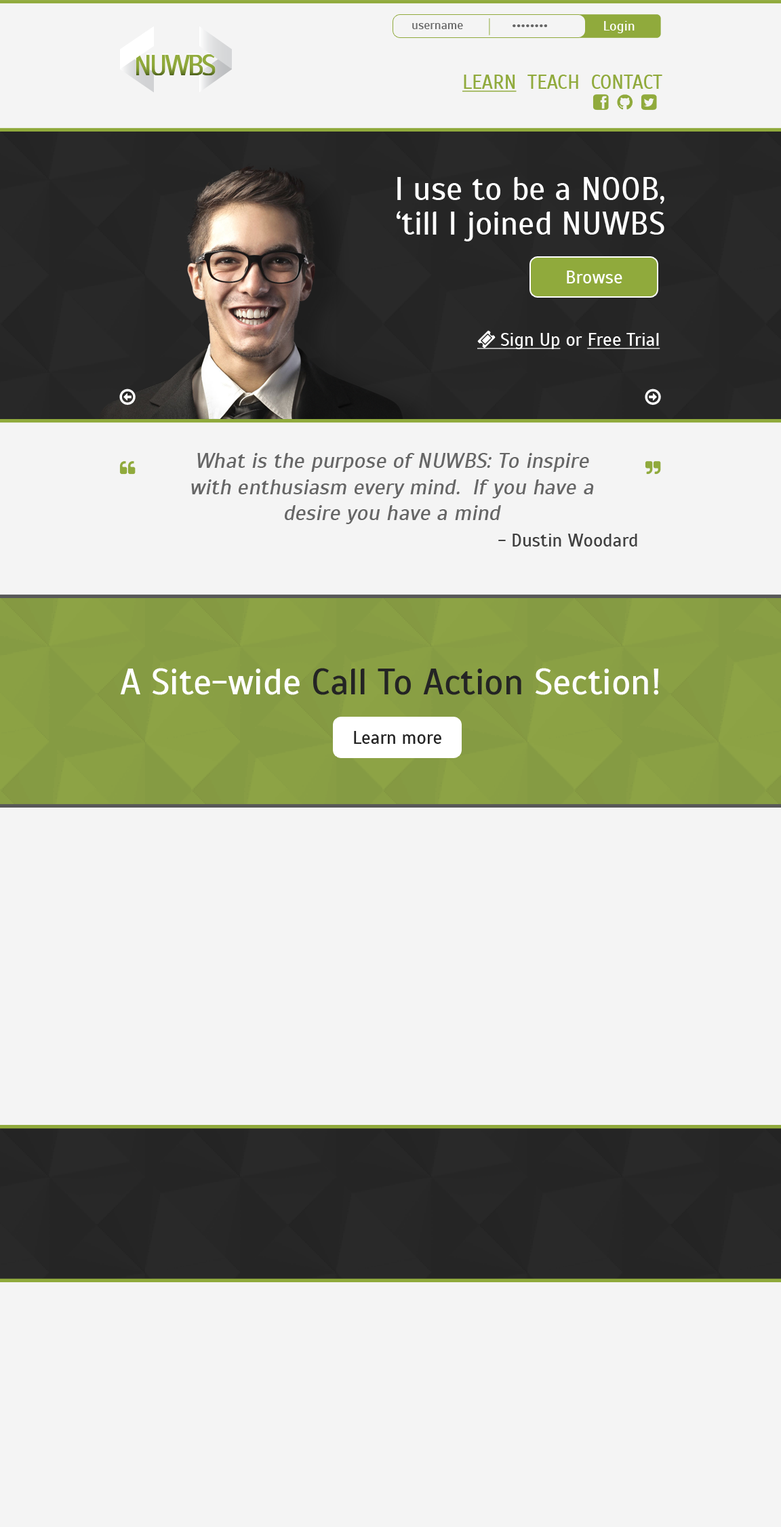
<style>
.page{position:relative;width:781px;height:1527px;background:#f4f4f4}
.page>*{position:absolute;margin:0}
.t1{font:12.2px "Scada-Regular";color:#666666}
.t2{font:13.8px "Scada-Regular";color:#ffffff}
.t3{font:19.4px "Scada-Regular";color:#90aa3c;text-transform:uppercase}
.t4{font:19.4px "Scada-Regular";color:#90aa3c;text-transform:uppercase;text-decoration:underline}
.t5{font:32.5px "Scada-Regular";color:#ffffff}
.t6{font:18.3px "Scada-Regular";color:#ffffff}
.t7{font:21.7px "Scada-Italic";color:#666666}
.t8{font:18.3px "Scada-Regular";color:#404040}
.t9{font:36.5px "Scada-Regular";color:#242424}
.t10{font:36.5px "Scada-Regular";color:#ffffff}
.t11{font:18.3px "Scada-Regular";color:#242424}
</style>
<div class="page">
<p class="t1" style="left:412px;top:23px;width:51px;height:6px">username</p>
<p class="t1" style="left:513px;top:24px;width:34px;height:3px">••••••••</p>
<p class="t2" style="left:604px;top:21px;width:31px;height:12px">Login</p>
<p class="t3" style="left:462px;top:75px;width:200px;height:17px"><span class="t4">Learn</span>  Teach  Contact</p>
<p class="t5" style="left:397px;top:177px;width:267px;height:27px">I use to be a NOOB,</p>
<p class="t5" style="left:396px;top:211px;width:268px;height:30px">‘till I joined NUWBS</p>
<p class="t6" style="left:567px;top:271px;width:55px;height:12px">Browse</p>
<p class="t7" style="left:191px;top:453px;width:403px;height:71px;text-align:center">What is the purpose of NUWBS: To inspire with enthusiasm every mind.  If you have a desire you have a mind</p>
<p class="t8" style="left:498px;top:534px;width:139px;height:12px">- Dustin Woodard</p>
<p class="t9" style="left:120px;top:668px;width:539px;height:27px"><span class="t10">A Site-wide </span>Call To Action <span class="t10">Section!</span></p>
<p class="t11" style="left:354px;top:731px;width:87px;height:13px">Learn more</p>
</div>
